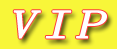
<style>
.page{position:relative;width:117px;height:49px;background:#f8f639}
.page>*{position:absolute;margin:0}
.t1{font:40px "SimSun";letter-spacing:0.08em;color:#fefeff;font-weight:bold;font-style:italic;scale:1.4 1}
</style>
<div class="page">
<p class="t1" style="left:13px;top:10px;width:94px;height:29px">VIP</p>
</div>
